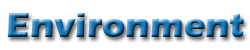
<style>
.page{position:relative;width:250px;height:50px;background:#ffffff}
.page>*{position:absolute;margin:0}
.t1{font:36px "ErasITC-Bold"}
</style>
<div class="page">
<p class="t1" style="left:7px;top:13px;width:237px;height:24px">Environment</p>
</div>
